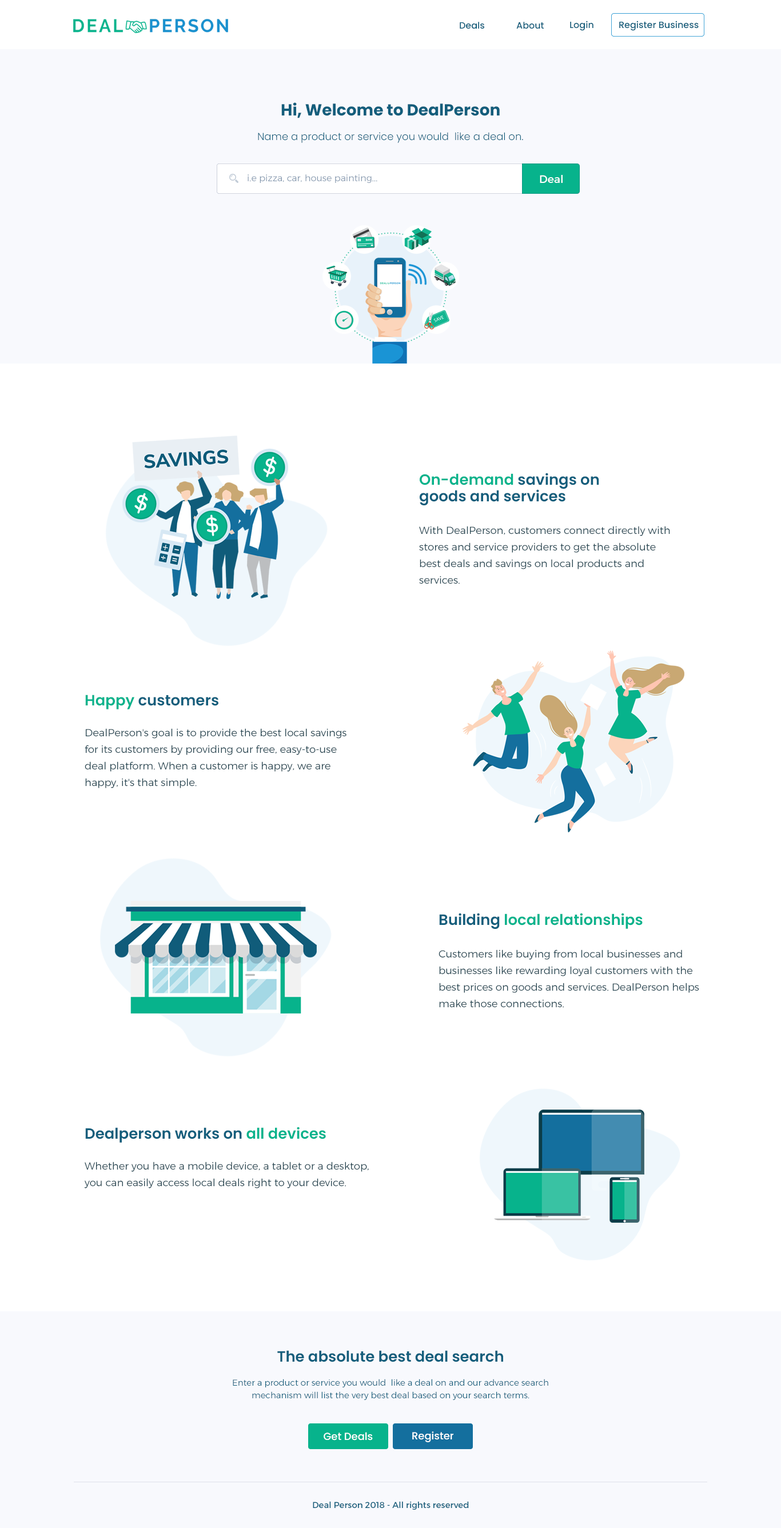
<style>
.page{position:relative;width:781px;height:1528px;background:#ffffff}
.page>*{position:absolute;margin:0}
.t1{font:9.1px "Poppins-Medium";color:#135e7c}
.t2{font:16px "Poppins-Bold";color:#135e7c}
.t3{font:10.3px "Poppins-Light";color:#135e7c}
.t4{font:9.1px "Montserrat-Light";color:#8296ad}
.t5{font:10.9px "Montserrat-Regular";color:#ffffff}
.t6{font:14.9px/16.6px "Poppins-SemiBold";color:#135e7c}
.t7{font:14.9px/16.6px "Poppins-SemiBold";color:#07b38c}
.t8{font:10.3px/16.6px "Montserrat-Light";color:#284753}
.t9{font:14.9px "Poppins-SemiBold";color:#135e7c}
.t10{font:14.9px "Poppins-SemiBold";color:#07b38c}
.t11{font:8.6px/12.6px "Montserrat-Light";color:#135e7c}
.t12{font:10.3px "Poppins-Medium";color:#ffffff}
.t13{font:8.6px "Montserrat-Regular";color:#135e7c}
</style>
<div class="page">
<p class="t1" style="left:459px;top:22px;width:25px;height:7px">Deals</p>
<p class="t1" style="left:516px;top:22px;width:27px;height:7px">About</p>
<p class="t1" style="left:570px;top:21px;width:23px;height:10px">Login</p>
<p class="t1" style="left:619px;top:21px;width:79px;height:10px">Register Business</p>
<p class="t2" style="left:281px;top:102px;width:218px;height:16px">Hi, Welcome to DealPerson</p>
<p class="t3" style="left:258px;top:132px;width:265px;height:11px">Name a product or service you would  like a deal on.</p>
<p class="t4" style="left:247px;top:174px;width:130px;height:9px">i.e pizza, car, house painting...</p>
<p class="t5" style="left:539px;top:175px;width:23px;height:8px">Deal</p>
<p class="t6" style="left:419px;top:473px;width:180px;height:32px;text-align:right"><span class="t7">On-demand</span> savings on<br>goods and services</p>
<p class="t8" style="left:419px;top:526px;width:251px;height:58px;text-align:right">With DealPerson, customers connect directly with <br>stores and service providers to get the absolute <br>best deals and savings on local products and <br>services.</p>
<p class="t9" style="left:85px;top:694px;width:133px;height:15px"><span class="t10">Happy</span> customers</p>
<p class="t8" style="left:85px;top:728px;width:261px;height:60px;text-align:right">DealPerson's goal is to provide the best local savings<br>for its customers by providing our free, easy-to-use <br>deal platform. When a customer is happy, we are <br>happy, it's that simple.</p>
<p class="t10" style="left:439px;top:913px;width:203px;height:16px"><span class="t9">Building </span>local relationships</p>
<p class="t8" style="left:438px;top:949px;width:261px;height:58px;text-align:right">Customers like buying from local businesses and <br>businesses like rewarding loyal customers with the <br>best prices on goods and services. DealPerson helps <br>make those connections.</p>
<p class="t9" style="left:85px;top:1126px;width:241px;height:16px">Dealperson works on <span class="t10">all devices</span></p>
<p class="t8" style="left:84px;top:1161px;width:285px;height:27px;text-align:right">Whether you have a mobile device, a tablet or a desktop,<br>you can easily access local deals right to your device.</p>
<p class="t9" style="left:277px;top:1350px;width:226px;height:12px">The absolute best deal search</p>
<p class="t11" style="left:233px;top:1378px;width:315px;height:22px;text-align:center">Enter a product or service you would  like a deal on and our advance search<br>mechanism will list the very best deal based on your search terms.</p>
<p class="t12" style="left:323px;top:1432px;width:50px;height:8px">Get Deals</p>
<p class="t12" style="left:412px;top:1431px;width:41px;height:11px">Register</p>
<p class="t13" style="left:313px;top:1501px;width:156px;height:8px">Deal Person 2018 - All rights reserved</p>
</div>
